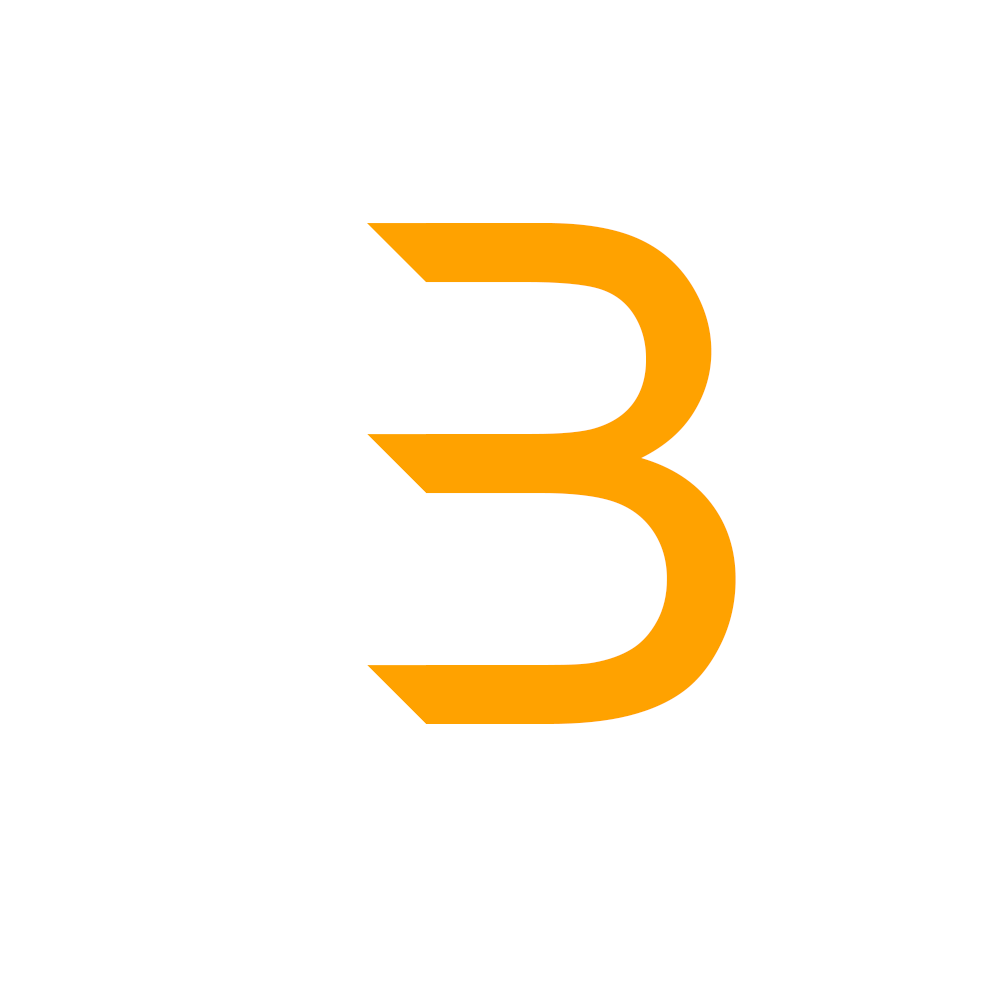
<style>
.page{position:relative;width:1000px;height:1000px;background:#ffffff}
.page>*{position:absolute;margin:0}
.t1{font:700px "ArialMT";color:#ffa200}
</style>
<div class="page">
<p class="t1" style="left:357px;top:223px;width:379px;height:501px">B</p>
</div>
